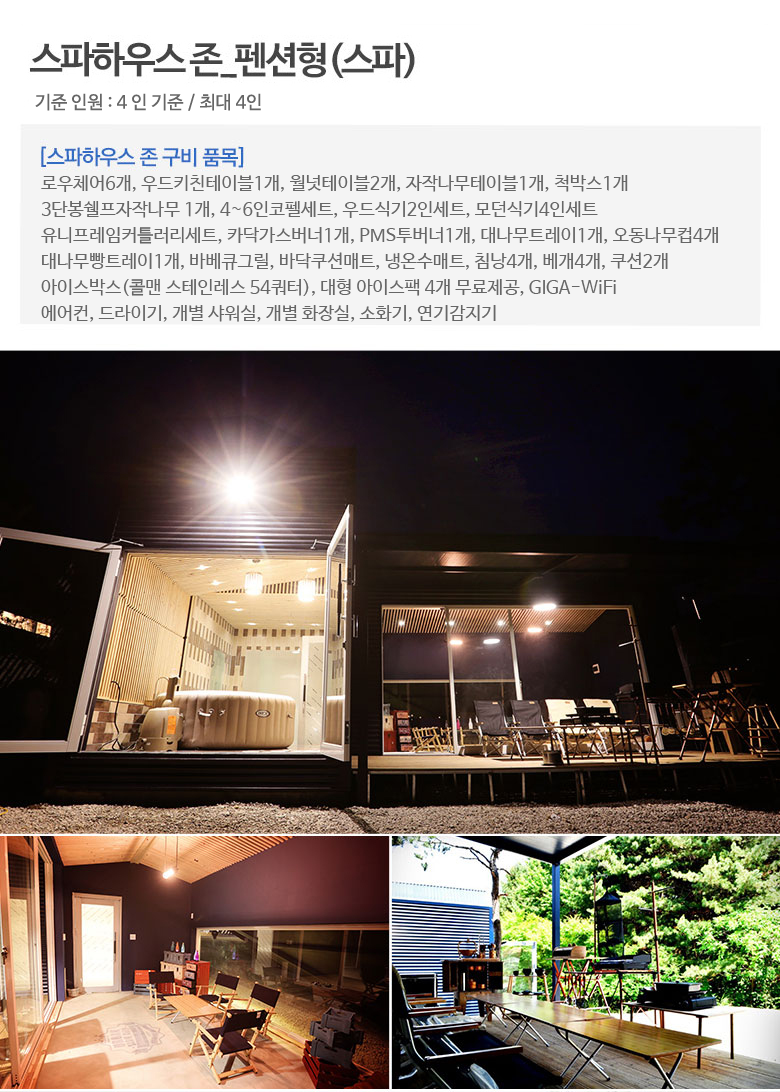
<style>
.page{position:relative;width:780px;height:1092px}
.page>*{position:absolute;margin:0}
.t1{font:18px "NanumBarunGothic";color:#666666}
.t2{font:18px/26px "NanumBarunGothic";color:#666666}
</style>
<div class="page">
<p class="t1" style="left:35px;top:93px;width:226px;height:18px">기준 인원 : 4 인 기준 / 최대 4인</p>
<p class="t2" style="left:41px;top:175px;width:677px;height:147px">로우체어6개, 우드키친테이블1개, 월넛테이블2개, 자작나무테이블1개, 척박스1개<br>3단봉쉘프자작나무 1개, 4~6인코펠세트, 우드식기2인세트, 모던식기4인세트<br>유니프레임커틀러리세트, 카닥가스버너1개, PMS투버너1개, 대나무트레이1개, 오동나무컵4개<br>대나무빵트레이1개, 바베큐그릴, 바닥쿠션매트, 냉온수매트, 침낭4개, 베개4개, 쿠션2개<br>아이스박스(콜맨 스테인레스 54쿼터), 대형 아이스팩 4개 무료제공, GIGA-WiFi<br>에어컨, 드라이기, 개별 샤워실, 개별 화장실, 소화기, 연기감지기</p>
</div>
